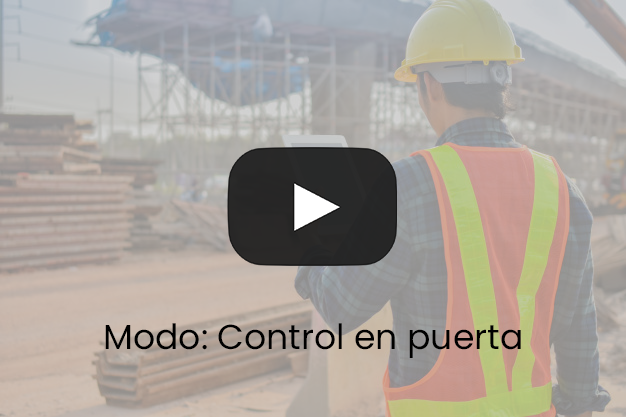
<style>
.page{position:relative;width:626px;height:417px}
.page>*{position:absolute;margin:0}
.t1{font:34.7px "Poppins-Regular";color:#000000}
</style>
<div class="page">
<p class="t1" style="left:105px;top:323px;width:416px;height:35px">Modo: Control en puerta</p>
</div>
